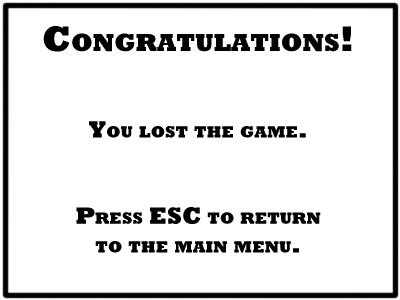
<style>
.page{position:relative;width:400px;height:300px;background:#ffffff}
.page>*{position:absolute;margin:0}
.t1{font:24px "Rockwell-ExtraBold";color:#000000;font-variant:small-caps}
.t2{font:36px "Rockwell-ExtraBold";color:#000000;font-variant:small-caps}
</style>
<div class="page">
<p class="t1" style="left:43px;top:26px;width:309px;height:227px;text-align:center"><span class="t2">Congratulations!<br></span><br><br>You lost the game.<br><br><br>Press ESC to return<br>to the main menu.</p>
</div>
